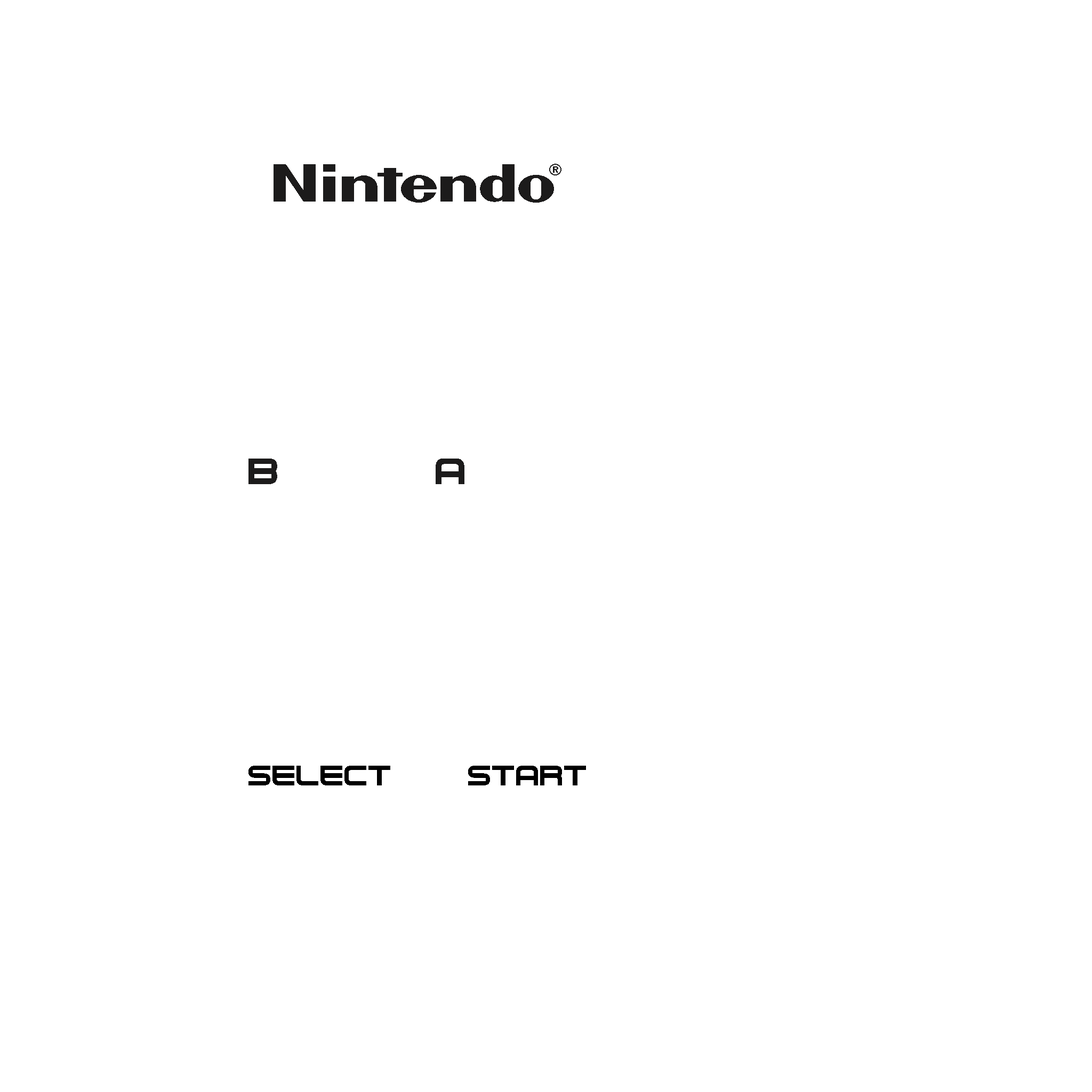
<style>
.page{position:relative;width:1092px;height:1092px;background:#ffffff}
.page>*{position:absolute;margin:0}
.t1{font:37.3px "RO-Spritendo-SemiBold-BETA";color:#1c1b1b}
.t2{font:38.4px "RO-Spritendo-SemiBold-BETA";color:#1c1b1b}
.t3{font:58.7px "NesController";color:#1c1b1b}
.t4{font:44.8px "NesController";color:#000000}
</style>
<div class="page">
<p class="t1" style="left:274px;top:164px;width:280px;height:39px">Nintendo</p>
<p class="t2" style="left:549px;top:164px;width:12px;height:11px">®</p>
<p class="t3" style="left:248px;top:459px;width:29px;height:25px">B</p>
<p class="t3" style="left:436px;top:459px;width:28px;height:25px">A</p>
<p class="t4" style="left:248px;top:766px;width:142px;height:19px">select</p>
<p class="t4" style="left:468px;top:766px;width:118px;height:19px">start</p>
</div>
